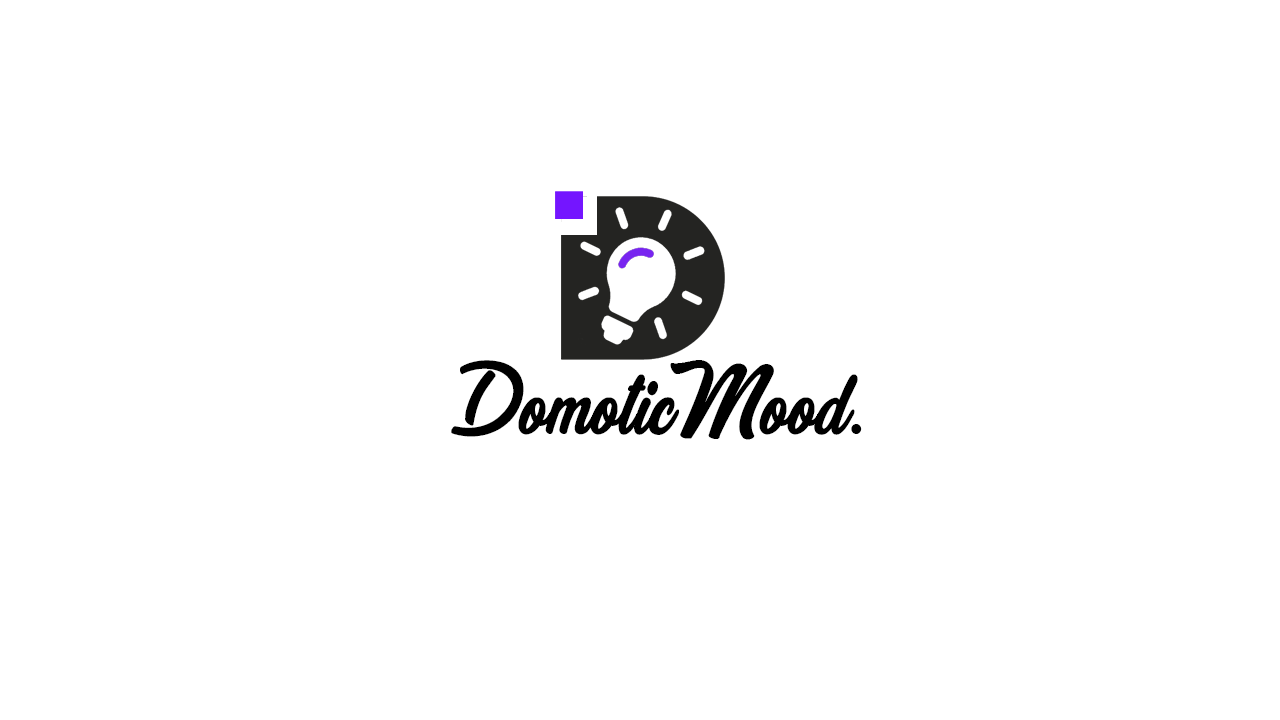
<style>
.page{position:relative;width:1280px;height:720px;background:#ffffff}
.page>*{position:absolute;margin:0}
.t1{font:90px "GottobeRealPersonalUse-Regular";color:#000000}
.t2{font:90px "TimesNewRomanPSMT";color:#000000}
</style>
<div class="page">
<p class="t1" style="left:451px;top:360px;width:411px;height:80px">DomoticMood<span class="t2">.</span></p>
</div>
